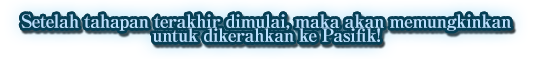
<style>
.page{position:relative;width:534px;height:59px}
.page>*{position:absolute;margin:0}
.t1{font:18px/14px "RyuminPro-ExBold";letter-spacing:-0.04em;color:#b9e0ff}
</style>
<div class="page">
<p class="t1" style="left:21px;top:14px;width:490px;height:28px;text-align:center">Setelah tahapan terakhir dimulai, maka akan memungkinkan<br>untuk dikerahkan ke Pasifik!</p>
</div>
